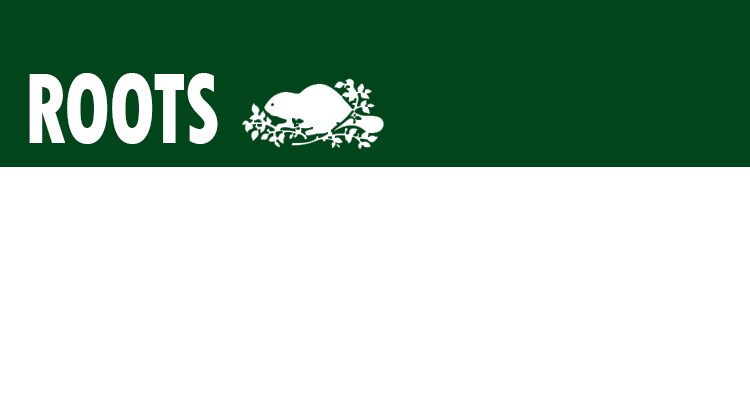
<style>
.page{position:relative;width:750px;height:400px;background:#ffffff}
.page>*{position:absolute;margin:0}
.t1{font:106.3px "TwCenMT-CondensedExtraBold";letter-spacing:-0.025em;color:#ffffff;scale:0.78 1}
</style>
<div class="page">
<p class="t1" style="left:29px;top:73px;width:189px;height:71px">ROOTS</p>
</div>
